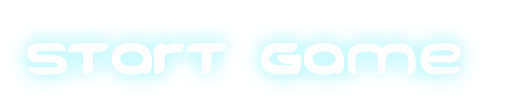
<style>
.page{position:relative;width:523px;height:109px;background:#ffffff}
.page>*{position:absolute;margin:0}
.t1{font:61.4px "FREEDOM";color:#ffffff}
</style>
<div class="page">
<p class="t1" style="left:27px;top:43px;width:434px;height:32px">START GAME</p>
</div>
